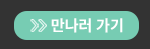
<style>
.page{position:relative;width:150px;height:49px;background:#333333}
.page>*{position:absolute;margin:0}
.t1{font:15.1px "NotoSansKR-Bold";color:#ffffff}
</style>
<div class="page">
<p class="t1" style="left:51px;top:18px;width:72px;height:15px">만나러 가기</p>
</div>
